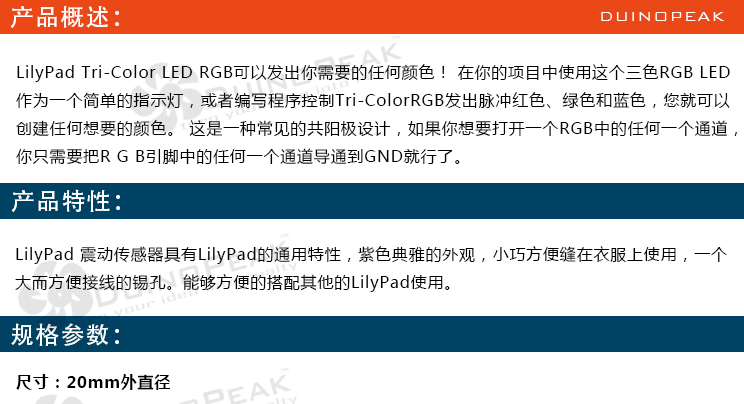
<style>
.page{position:relative;width:744px;height:404px;background:#ffffff}
.page>*{position:absolute;margin:0}
.t1{font:24px "AdobeHeitiStd-Regular";letter-spacing:0.05em;color:#ffffff}
.t2{font:18px "BankGothicBT-Light";letter-spacing:0.05em;color:#ffffff}
.t3{font:16px "MicrosoftYaHei";letter-spacing:0.05em;color:#000000}
.t4{font:16px "MicrosoftYaHei-Bold";letter-spacing:0.05em;color:#000000}
</style>
<div class="page">
<p class="t1" style="left:10px;top:6px;width:109px;height:23px">产品概述：</p>
<p class="t2" style="left:601px;top:12px;width:124px;height:9px">DUINOPEAK</p>
<p class="t3" style="left:16px;top:64px;width:721px;height:101px">LilyPad Tri-Color LED RGB可以发出你需要的任何颜色！ 在你的项目中使用这个三色RGB LED<br>作为一个简单的指示灯，或者编写程序控制Tri-ColorRGB发出脉冲红色、绿色和蓝色，您就可以<br>创建任何想要的颜色。 这是一种常见的共阳极设计，如果你想要打开一个RGB中的任何一个通道，<br>你只需要把R G B引脚中的任何一个通道导通到GND就行了。</p>
<p class="t1" style="left:11px;top:189px;width:109px;height:24px">产品特性：</p>
<p class="t3" style="left:15px;top:246px;width:712px;height:46px">LilyPad 震动传感器具有LilyPad的通用特性，紫色典雅的外观，小巧方便缝在衣服上使用，一个<br>大而方便接线的锡孔。能够方便的搭配其他的LilyPad使用。</p>
<p class="t1" style="left:11px;top:323px;width:108px;height:23px">规格参数：</p>
<p class="t4" style="left:16px;top:374px;width:155px;height:16px">尺寸：20mm外直径</p>
</div>
